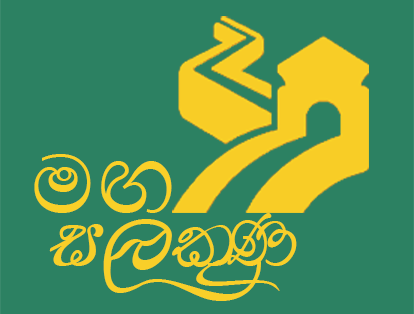
<style>
.page{position:relative;width:414px;height:314px;background:#2c8162}
.page>*{position:absolute;margin:0}
.t1{font:94.7px "DL-Lihini";color:#f9d028}
.t2{font:82.2px "FNNILANTHINormal";color:#f8cf29}
</style>
<div class="page">
<p class="t1" style="left:34px;top:154px;width:138px;height:59px">uÕ</p>
<p class="t2" style="left:49px;top:213px;width:248px;height:88px">i,l=K</p>
</div>
